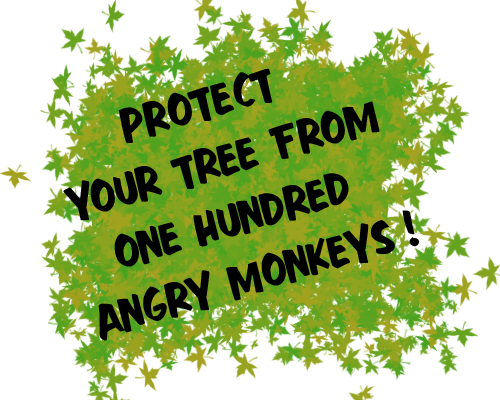
<style>
.page{position:relative;width:500px;height:400px;background:#ffffff}
.page>*{position:absolute;margin:0}
.t1{font:50px "FastAction";color:#000000}
</style>
<div class="page">
<p class="t1" style="left:63px;top:68px;width:357px;height:273px;text-align:center;rotate:-17deg">PROTECT <br>YOUR TREE FROM<br>ONE HUNDRED <br>ANGRY MONKEYS !</p>
</div>
